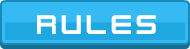
<style>
.page{position:relative;width:190px;height:49px;background:#35baf3}
.page>*{position:absolute;margin:0}
.t1{font:30px "KenVector-Future";color:#ffffff}
</style>
<div class="page">
<p class="t1" style="left:37px;top:15px;width:119px;height:19px">rules</p>
</div>
